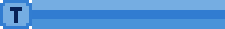
<style>
.page{position:relative;width:225px;height:29px;background:#75ade2}
.page>*{position:absolute;margin:0}
.t1{font:24px "BerlinSansFBDemi-Bold";color:#072257}
</style>
<div class="page">
<p class="t1" style="left:10px;top:7px;width:12px;height:16px">T</p>
</div>
